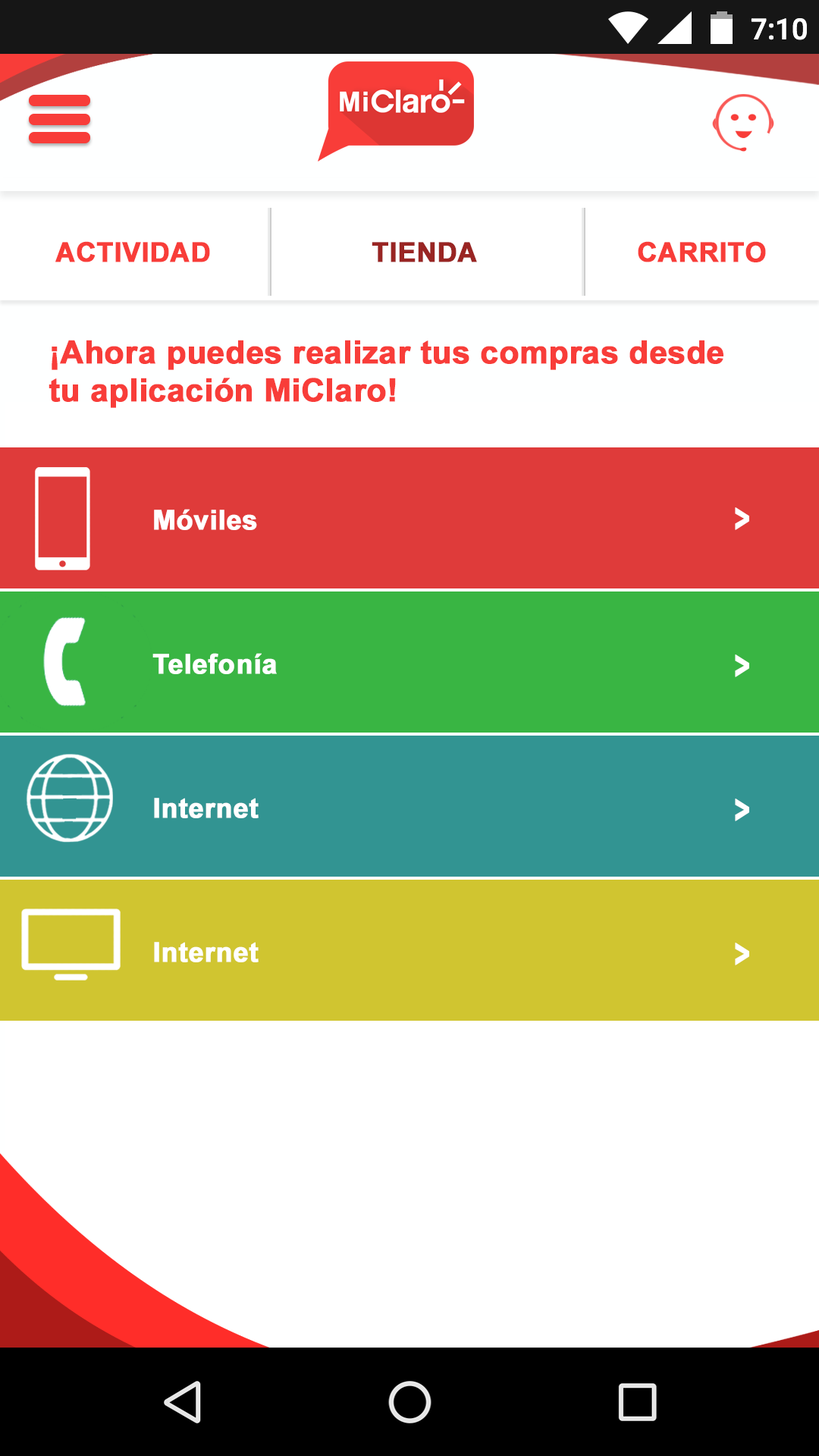
<style>
.page{position:relative;width:819px;height:1456px;background:#ffffff}
.page>*{position:absolute;margin:0}
.t1{font:28.8px "Roboto-Medium";color:#ffffff}
.t2{font:27.4px "Arial-BoldMT";color:#f83d39;font-weight:bold}
.t3{font:27.4px "Arial-BoldMT";color:#992523;font-weight:bold}
.t4{font:31.8px "Arial-BoldMT";color:#f83d39;font-weight:bold}
.t5{font:27.4px "Arial-BoldMT";color:#ffffff;font-weight:bold}
.t6{font:39.7px "Arial-BoldMT";color:#ffffff;font-weight:bold;scale:0.69 1}
</style>
<div class="page">
<p class="t1" style="left:751px;top:18px;width:56px;height:22px">7:10</p>
<p class="t2" style="left:55px;top:241px;width:155px;height:21px">ACTIVIDAD</p>
<p class="t3" style="left:372px;top:242px;width:105px;height:20px">TIENDA</p>
<p class="t2" style="left:638px;top:241px;width:128px;height:21px">CARRITO</p>
<p class="t4" style="left:49px;top:340px;width:674px;height:68px">¡Ahora puedes realizar tus compras desde<br>tu aplicación MiClaro!</p>
<p class="t5" style="left:154px;top:509px;width:103px;height:21px">Móviles</p>
<p class="t6" style="left:735px;top:507px;width:14px;height:23px">&gt;</p>
<p class="t5" style="left:152px;top:653px;width:125px;height:21px">Telefonía</p>
<p class="t6" style="left:735px;top:654px;width:14px;height:23px">&gt;</p>
<p class="t5" style="left:154px;top:798px;width:105px;height:20px">Internet</p>
<p class="t6" style="left:735px;top:799px;width:14px;height:22px">&gt;</p>
<p class="t5" style="left:154px;top:942px;width:105px;height:20px">Internet</p>
<p class="t6" style="left:735px;top:943px;width:14px;height:22px">&gt;</p>
</div>
